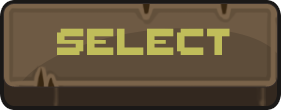
<style>
.page{position:relative;width:281px;height:110px;background:#5e4d3a}
.page>*{position:absolute;margin:0}
.t1{font:60px "ThaleahFat";color:#c0bd5a}
</style>
<div class="page">
<p class="t1" style="left:57px;top:28px;width:173px;height:27px">SELECT</p>
</div>
